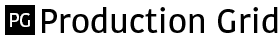
<style>
.page{position:relative;width:280px;height:40px;background:#ffffff}
.page>*{position:absolute;margin:0}
.t1{font:33.8px "KohinoorBangla-Medium";color:#000000}
</style>
<div class="page">
<p class="t1" style="left:42px;top:7px;width:236px;height:26px">Production Grid</p>
</div>
